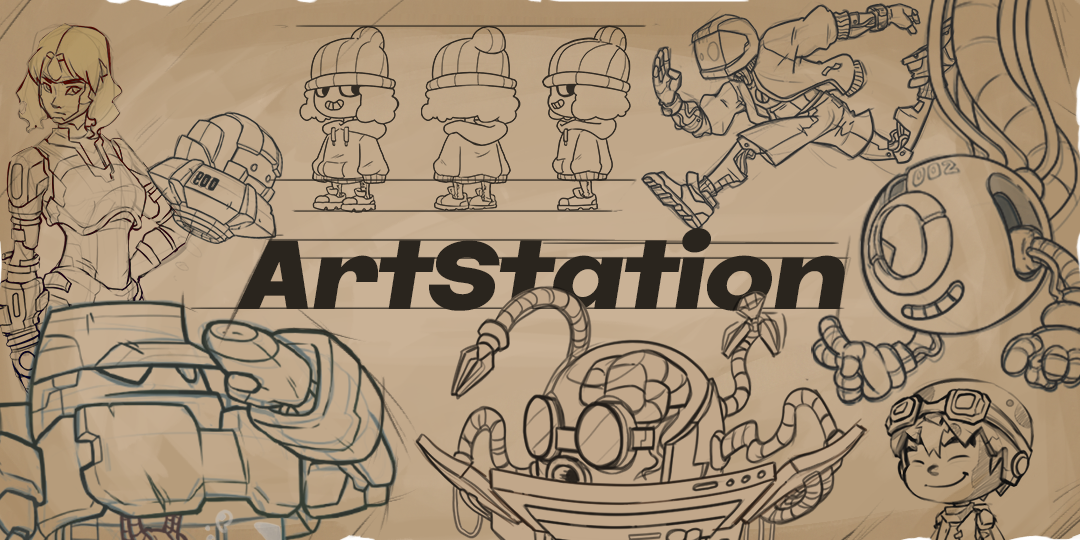
<style>
.page{position:relative;width:1080px;height:540px}
.page>*{position:absolute;margin:0}
.t1{font:98.6px "JumperPERSONALUSEONLY-Extra-BoldItalic";color:#2a251e}
</style>
<div class="page">
<p class="t1" style="left:236px;top:228px;width:609px;height:83px">ArtStation</p>
</div>
